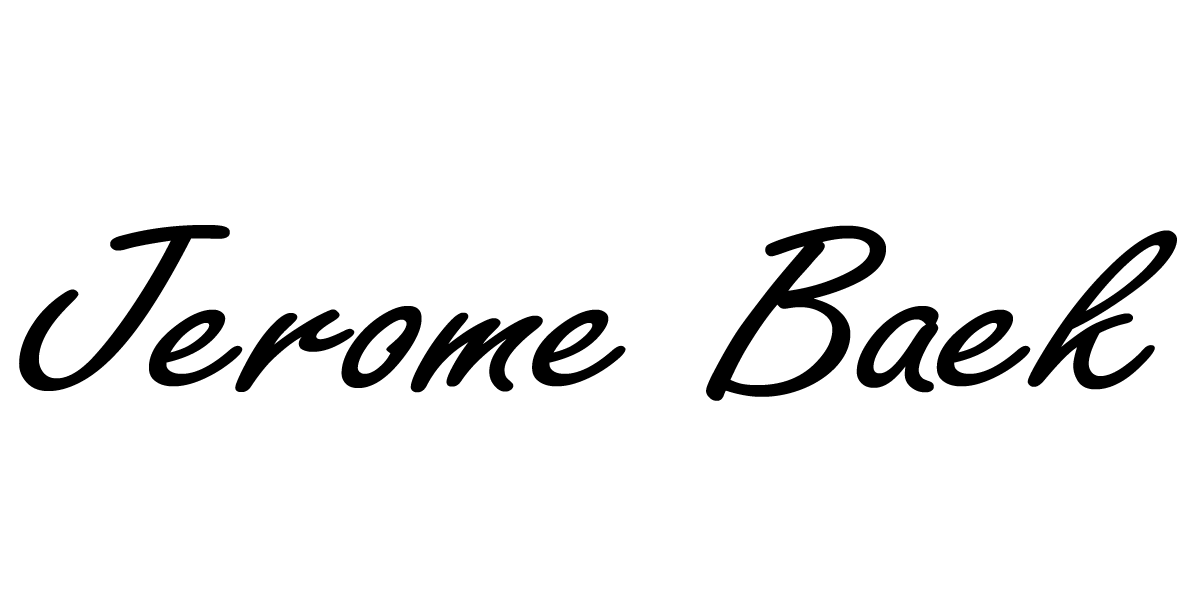
<style>
.page{position:relative;width:1200px;height:600px;background:#ffffff}
.page>*{position:absolute;margin:0}
.t1{font:255px "FreestyleScript-Regular";letter-spacing:-0.01em;color:#000000;scale:1.33 1}
</style>
<div class="page">
<p class="t1" style="left:19px;top:225px;width:1158px;height:176px">Jerome Baek</p>
</div>
